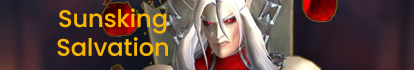
<style>
.page{position:relative;width:414px;height:70px}
.page>*{position:absolute;margin:0}
.t1{font:24px "Poppins-Medium";color:#f8b700}
</style>
<div class="page">
<p class="t1" style="left:57px;top:8px;width:111px;height:48px;text-align:center">Sunsking<br>Salvation</p>
</div>
